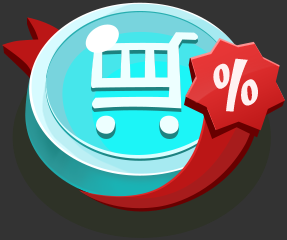
<style>
.page{position:relative;width:287px;height:240px;background:#333333}
.page>*{position:absolute;margin:0}
.t1{font:54.7px "v_CCZoinks";color:#fff1f1}
</style>
<div class="page">
<p class="t1" style="left:213px;top:58px;width:45px;height:54px;rotate:-22deg">%</p>
</div>
